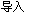
<style>
.page{position:relative;width:49px;height:13px;background:#ffffff}
.page>*{position:absolute;margin:0}
.t1{font:12px "SimSun";color:#000000}
</style>
<div class="page">
<p class="t1" style="left:1px;top:1px;width:23px;height:11px">导入</p>
</div>
